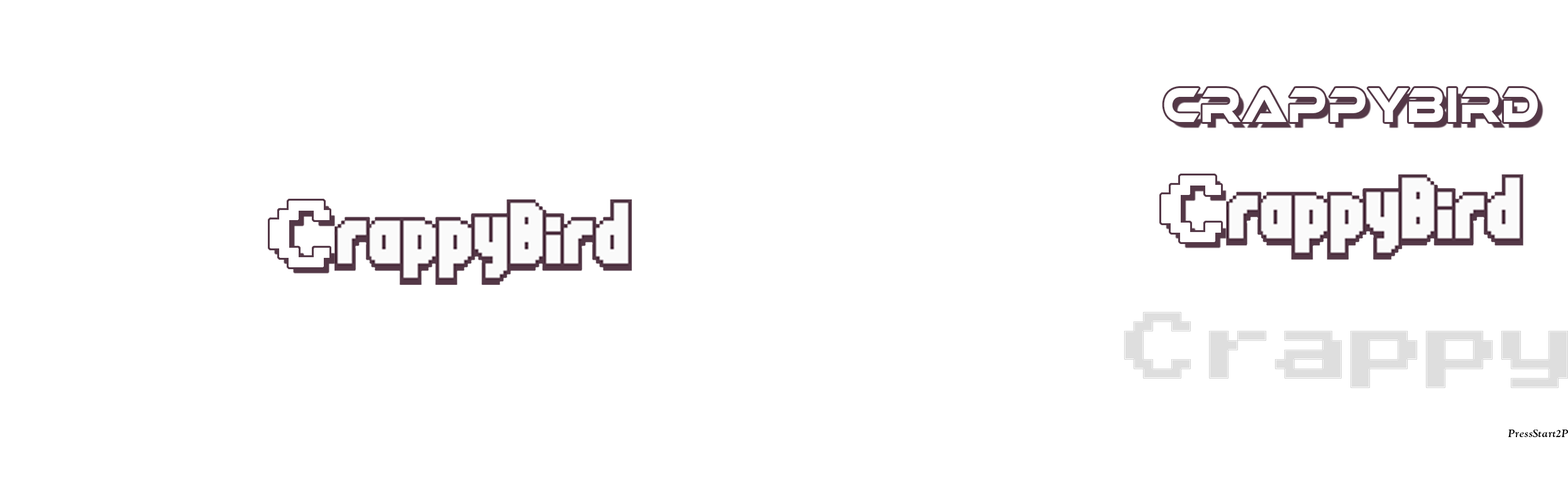
<style>
.page{position:relative;width:1568px;height:483px;background:#ffffff}
.page>*{position:absolute;margin:0}
.t1{font:50.3px "EthnocentricRg-Regular";letter-spacing:0.024em;color:#ffffff;scale:0.79 1}
.t2{font:10.7px "LTCGoudyOldstylePro-BoldItalic";letter-spacing:0.024em;color:#000000}
</style>
<div class="page">
<p class="t1" style="left:1164px;top:87px;width:374px;height:35px">CrappyBird</p>
<p class="t2" style="left:1508px;top:429px;width:60px;height:8px">PressStart2P</p>
</div>
